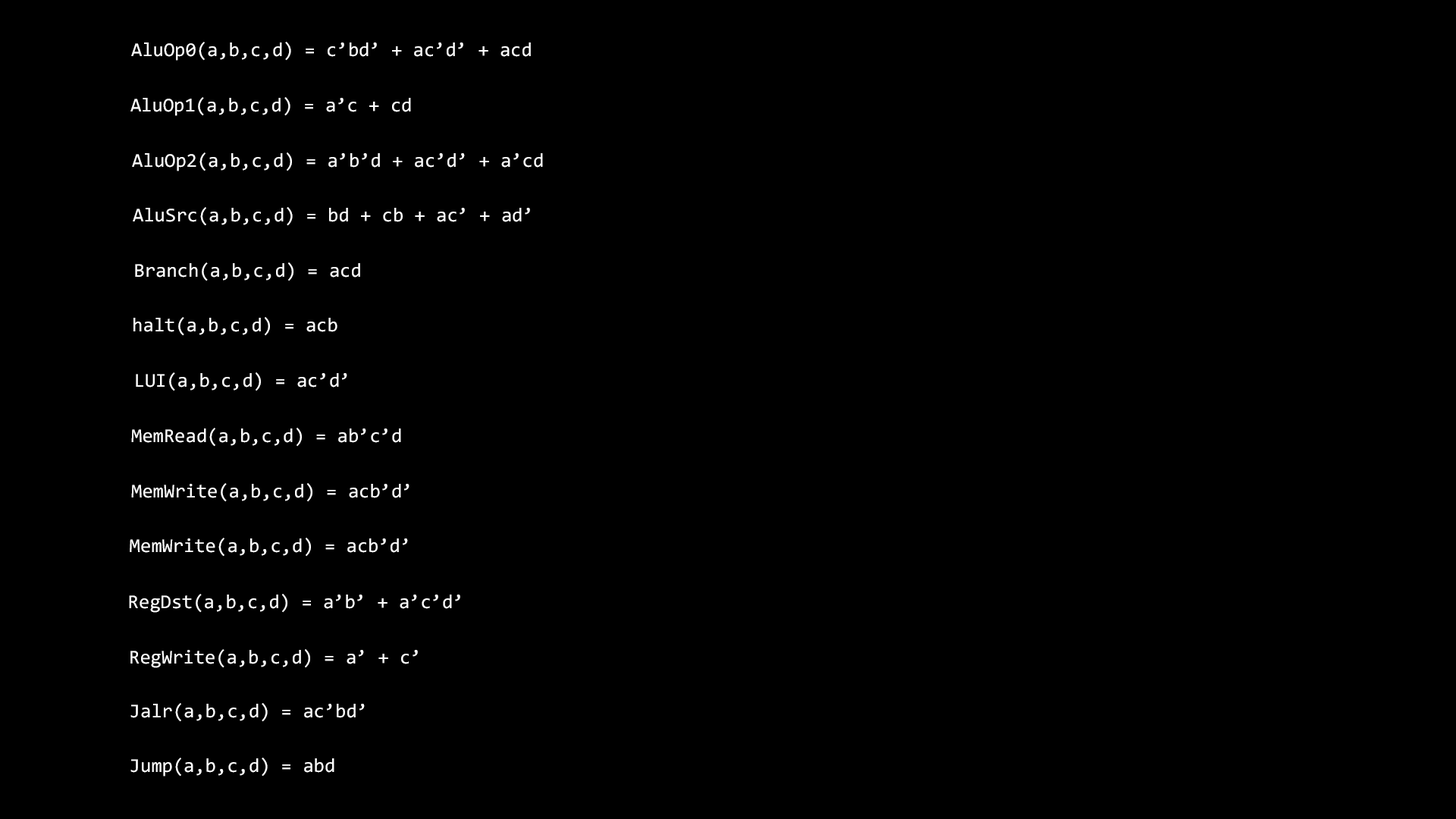
<style>
.page{position:relative;width:1456px;height:819px;background:#000000}
.page>*{position:absolute;margin:0}
.t1{font:19.7px "Consolas";color:#ffffff}
</style>
<div class="page">
<p class="t1" style="left:131px;top:42px;width:400px;height:19px">AluOp0(a,b,c,d) = c’bd’ + ac’d’ + acd</p>
<p class="t1" style="left:130px;top:97px;width:281px;height:19px">AluOp1(a,b,c,d) = a’c + cd</p>
<p class="t1" style="left:132px;top:152px;width:411px;height:19px">AluOp2(a,b,c,d) = a’b’d + ac’d’ + a’cd</p>
<p class="t1" style="left:133px;top:207px;width:397px;height:19px">AluSrc(a,b,c,d) = bd + cb + ac’ + ad’</p>
<p class="t1" style="left:135px;top:262px;width:225px;height:19px">Branch(a,b,c,d) = acd</p>
<p class="t1" style="left:133px;top:317px;width:204px;height:19px">halt(a,b,c,d) = acb</p>
<p class="t1" style="left:136px;top:372px;width:211px;height:19px">LUI(a,b,c,d) = ac’d’</p>
<p class="t1" style="left:131px;top:428px;width:270px;height:19px">MemRead(a,b,c,d) = ab’c’d</p>
<p class="t1" style="left:131px;top:483px;width:278px;height:19px">MemWrite(a,b,c,d) = acb’d’</p>
<p class="t1" style="left:130px;top:538px;width:278px;height:19px">MemWrite(a,b,c,d) = acb’d’</p>
<p class="t1" style="left:129px;top:594px;width:331px;height:19px">RegDst(a,b,c,d) = a’b’ + a’c’d’</p>
<p class="t1" style="left:130px;top:649px;width:288px;height:19px">RegWrite(a,b,c,d) = a’ + c’</p>
<p class="t1" style="left:130px;top:703px;width:235px;height:19px">Jalr(a,b,c,d) = ac’bd’</p>
<p class="t1" style="left:130px;top:758px;width:204px;height:19px">Jump(a,b,c,d) = abd</p>
</div>
